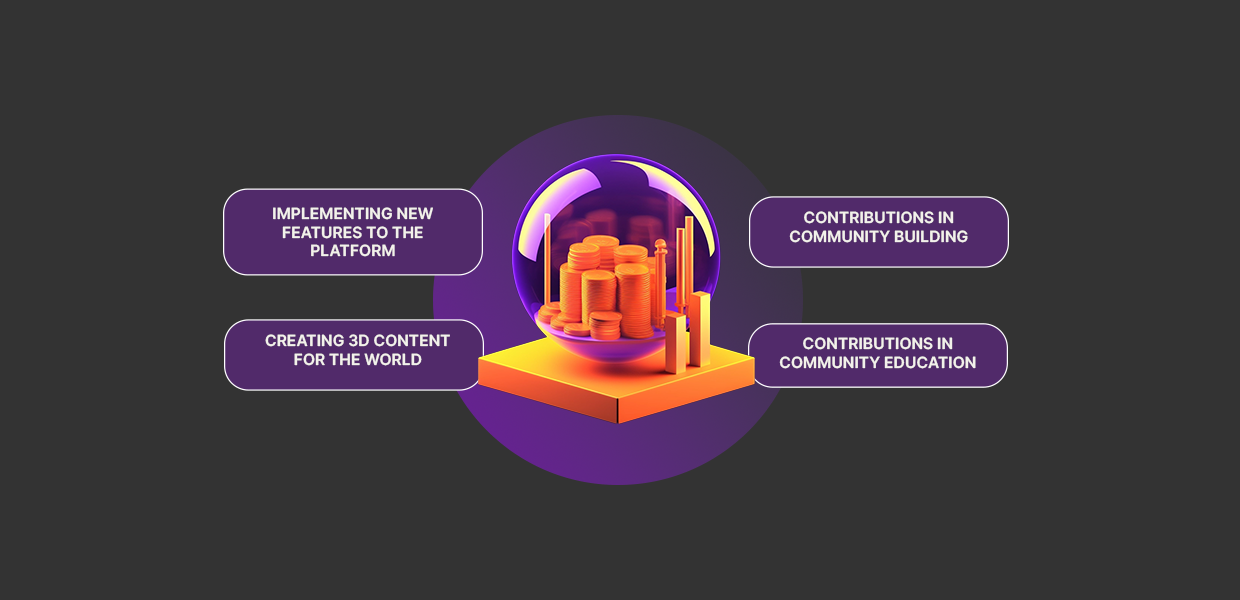
<style>
.page{position:relative;width:1240px;height:600px;background:#333333}
.page>*{position:absolute;margin:0}
.t1{font:15.4px "Inter-SemiBold";color:#f3f2eb;text-transform:uppercase}
</style>
<div class="page">
<p class="t1" style="left:273px;top:207px;width:160px;height:50px;text-align:center">implementing new features to the platform</p>
<p class="t1" style="left:789px;top:211px;width:179px;height:32px;text-align:center">contributions in community building</p>
<p class="t1" style="left:265px;top:334px;width:185px;height:32px;text-align:center">creating 3D content for the world</p>
<p class="t1" style="left:779px;top:337px;width:197px;height:32px;text-align:center">contributions in community education</p>
</div>
